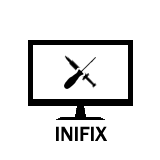
<style>
.page{position:relative;width:160px;height:160px;background:#ffffff}
.page>*{position:absolute;margin:0}
.t1{font:20.8px "FranklinGothic-Medium";letter-spacing:-0.002em;color:#000000}
</style>
<div class="page">
<p class="t1" style="left:56px;top:126px;width:51px;height:15px">INIFIX</p>
</div>
